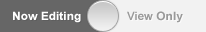
<style>
.page{position:relative;width:206px;height:32px;background:#f2f2f2}
.page>*{position:absolute;margin:0}
.t1{font:11.4px "Arial-BoldMT";color:#ffffff;scale:1.05 1}
.t2{font:11.4px "Arial-BoldMT";color:#a4a4a4}
</style>
<div class="page">
<p class="t1" style="left:13px;top:11px;width:68px;height:12px">Now Editing</p>
<p class="t2" style="left:127px;top:11px;width:56px;height:12px">View <span class="t1">Only</span></p>
</div>
